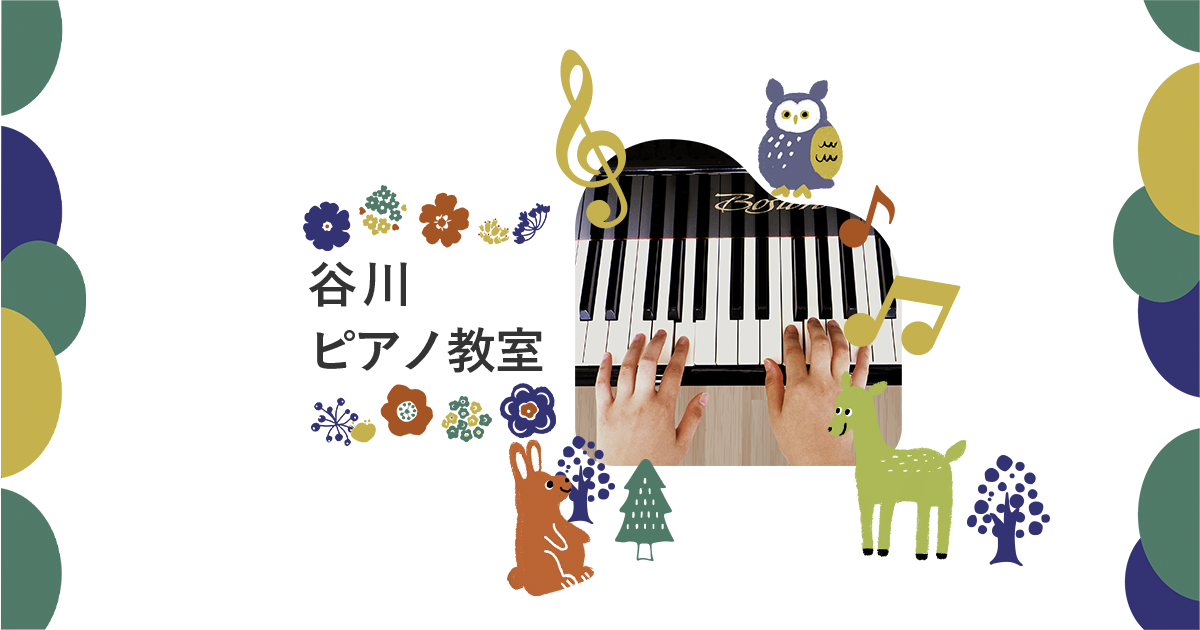
<style>
.page{position:relative;width:1200px;height:630px;background:#ffffff}
.page>*{position:absolute;margin:0}
.t1{font:50px/66.7px "YuGo-Bold";letter-spacing:-0.075em;color:#333333}
.t2{font:50px/66.7px "YuGo-Bold";letter-spacing:0.1em;color:#333333}
.t3{font:50px/66.7px "YuGo-Bold";letter-spacing:-0.01em;color:#333333}
</style>
<div class="page">
<p class="t1" style="left:308px;top:261px;width:235px;height:112px"><span class="t2">谷川<br></span>ピアノ<span class="t3">教室</span></p>
</div>
